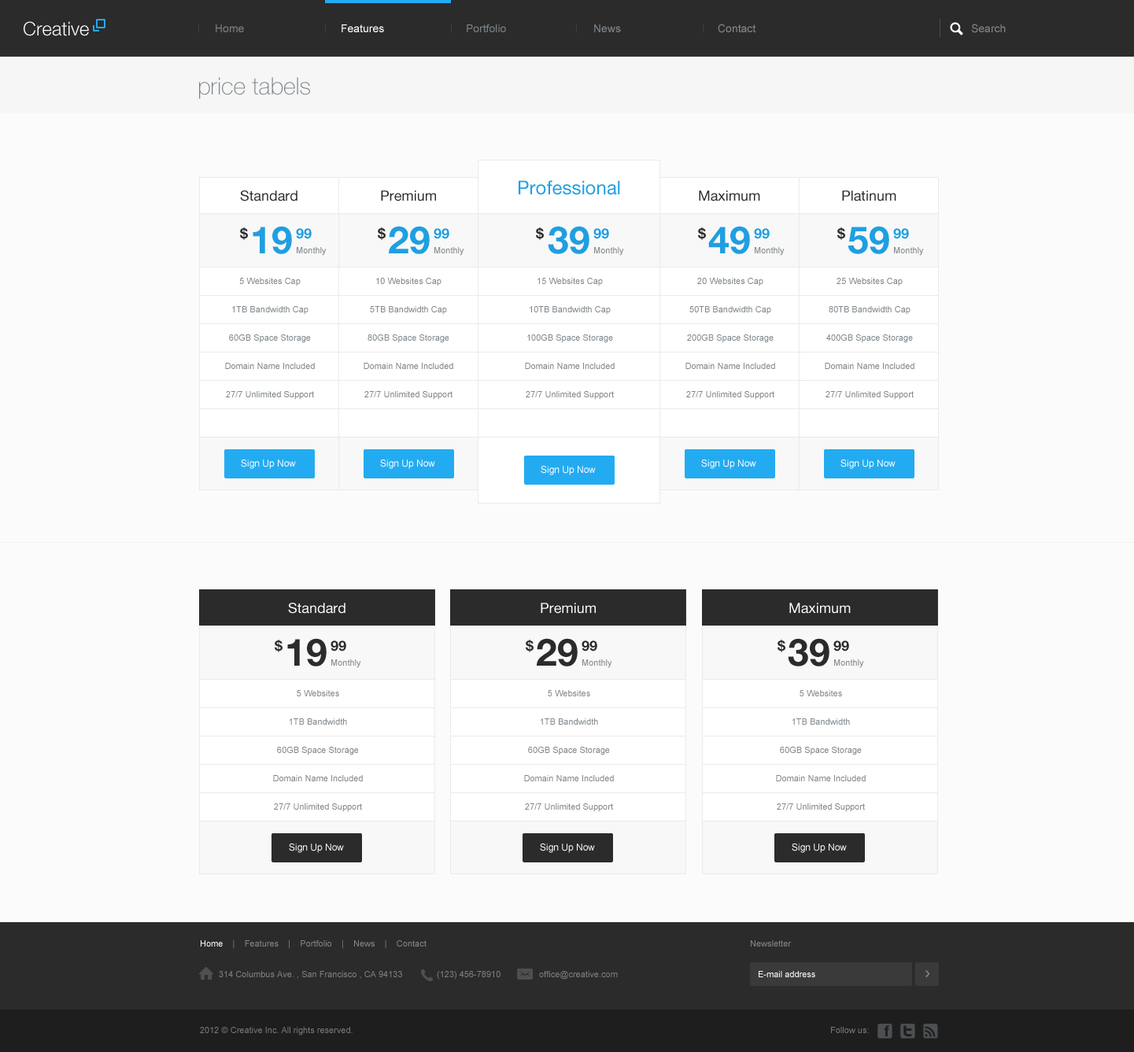
<style>
.page{position:relative;width:1134px;height:1052px;background:#fbfbfb}
.page>*{position:absolute;margin:0}
.t1{font:18.9px "HelveticaNeueLTStd-Lt";color:#ffffff}
.t2{font:8.2px "HelveticaNeueLTStd-Lt";scale:1.35 1}
.t3{font:11px "ArialMT";color:#7a8186}
.t4{font:11px "ArialMT";color:#ffffff}
.t5{font:11px "ArialMT";color:#80878c}
.t6{font:23.6px "HelveticaNeueLTStd-Th";color:#7a8186}
.t7{font:18.9px "HelveticaNeueLTStd-Roman";color:#1f9fe1}
.t8{font:14.2px "HelveticaNeueLTStd-Roman";color:#2b2b2b}
.t9{font:14.2px "HelveticaNeueLTStd-Bd";color:#2b2b2b}
.t10{font:37.8px "HelveticaNeueLTStd-Bd";color:#1f9fe1}
.t11{font:14.2px "HelveticaNeueLTStd-Bd";color:#1f9fe1}
.t12{font:8.7px "ArialMT";color:#80878c}
.t13{font:8.7px/28.3px "ArialMT";color:#80878c}
.t14{font:9.4px "ArialMT";color:#ffffff}
.t15{font:14.2px "HelveticaNeueLTStd-Roman";color:#ffffff}
.t16{font:37.8px "HelveticaNeueLTStd-Bd";color:#2b2b2b}
.t17{font:8.7px "ArialMT";color:#ffffff}
.t18{font:8.7px "ArialMT";color:#7a8186}
.t19{font:8.7px "ArialMT";color:#797979}
</style>
<div class="page">
<p class="t1" style="left:24px;top:21px;width:65px;height:15px">Creative</p>
<p class="t2" style="left:198px;top:24px;width:1px;height:9px">|</p>
<p class="t3" style="left:216px;top:24px;width:28px;height:8px">Home</p>
<p class="t2" style="left:325px;top:24px;width:1px;height:9px">|</p>
<p class="t4" style="left:341px;top:24px;width:43px;height:8px">Features</p>
<p class="t2" style="left:451px;top:24px;width:1px;height:9px">|</p>
<p class="t3" style="left:467px;top:24px;width:39px;height:8px">Portfolio</p>
<p class="t2" style="left:576px;top:24px;width:1px;height:9px">|</p>
<p class="t5" style="left:594px;top:24px;width:27px;height:8px">News</p>
<p class="t2" style="left:703px;top:24px;width:0px;height:9px">|</p>
<p class="t5" style="left:717px;top:24px;width:39px;height:9px">Contact</p>
<p class="t5" style="left:971px;top:24px;width:34px;height:9px">Search</p>
<p class="t6" style="left:199px;top:77px;width:111px;height:22px">price tabels</p>
<p class="t7" style="left:518px;top:180px;width:102px;height:15px">Professional</p>
<p class="t8" style="left:240px;top:190px;width:57px;height:11px">Standard</p>
<p class="t8" style="left:381px;top:190px;width:55px;height:11px">Premium</p>
<p class="t8" style="left:699px;top:190px;width:61px;height:11px">Maximum</p>
<p class="t8" style="left:842px;top:190px;width:54px;height:11px">Platinum</p>
<p class="t9" style="left:240px;top:227px;width:8px;height:13px">$</p>
<p class="t10" style="left:253px;top:226px;width:39px;height:28px">19</p>
<p class="t11" style="left:296px;top:228px;width:16px;height:11px">99</p>
<p class="t9" style="left:378px;top:227px;width:7px;height:13px">$</p>
<p class="t10" style="left:389px;top:226px;width:41px;height:28px">29</p>
<p class="t11" style="left:433px;top:228px;width:16px;height:11px">99</p>
<p class="t9" style="left:536px;top:227px;width:8px;height:13px">$</p>
<p class="t10" style="left:548px;top:226px;width:41px;height:28px">39</p>
<p class="t11" style="left:593px;top:228px;width:16px;height:11px">99</p>
<p class="t9" style="left:698px;top:227px;width:8px;height:13px">$</p>
<p class="t10" style="left:708px;top:226px;width:42px;height:28px">49</p>
<p class="t11" style="left:754px;top:228px;width:15px;height:11px">99</p>
<p class="t9" style="left:837px;top:227px;width:8px;height:13px">$</p>
<p class="t10" style="left:847px;top:226px;width:42px;height:28px">59</p>
<p class="t11" style="left:893px;top:228px;width:16px;height:11px">99</p>
<p class="t12" style="left:297px;top:247px;width:29px;height:9px">Monthly</p>
<p class="t12" style="left:434px;top:247px;width:30px;height:9px">Monthly</p>
<p class="t12" style="left:594px;top:247px;width:30px;height:9px">Monthly</p>
<p class="t12" style="left:754px;top:247px;width:30px;height:9px">Monthly</p>
<p class="t12" style="left:894px;top:247px;width:30px;height:9px">Monthly</p>
<p class="t13" style="left:225px;top:278px;width:90px;height:122px;text-align:center">5 Websites Cap<br>1TB Bandwidth Cap<br>60GB Space Storage<br>Domain Name Included<br>27/7 Unlimited Support</p>
<p class="t13" style="left:363px;top:278px;width:90px;height:122px;text-align:center">10 Websites Cap<br>5TB Bandwidth Cap<br>80GB Space Storage<br>Domain Name Included<br>27/7 Unlimited Support</p>
<p class="t13" style="left:525px;top:278px;width:89px;height:122px;text-align:center">15 Websites Cap<br>10TB Bandwidth Cap<br>100GB Space Storage<br>Domain Name Included<br>27/7 Unlimited Support</p>
<p class="t13" style="left:685px;top:278px;width:90px;height:122px;text-align:center">20 Websites Cap<br>50TB Bandwidth Cap<br>200GB Space Storage<br>Domain Name Included<br>27/7 Unlimited Support</p>
<p class="t13" style="left:824px;top:278px;width:90px;height:122px;text-align:center">25 Websites Cap<br>80TB Bandwidth Cap<br>400GB Space Storage<br>Domain Name Included<br>27/7 Unlimited Support</p>
<p class="t14" style="left:241px;top:459px;width:55px;height:10px">Sign Up Now</p>
<p class="t14" style="left:380px;top:459px;width:55px;height:10px">Sign Up Now</p>
<p class="t14" style="left:701px;top:459px;width:55px;height:10px">Sign Up Now</p>
<p class="t14" style="left:840px;top:459px;width:55px;height:10px">Sign Up Now</p>
<p class="t14" style="left:540px;top:466px;width:56px;height:9px">Sign Up Now</p>
<p class="t15" style="left:288px;top:603px;width:57px;height:11px">Standard</p>
<p class="t15" style="left:540px;top:603px;width:56px;height:11px">Premium</p>
<p class="t15" style="left:789px;top:603px;width:61px;height:11px">Maximum</p>
<p class="t9" style="left:275px;top:639px;width:7px;height:13px">$</p>
<p class="t16" style="left:287px;top:638px;width:39px;height:28px">19</p>
<p class="t9" style="left:330px;top:640px;width:16px;height:11px">99</p>
<p class="t9" style="left:526px;top:639px;width:7px;height:13px">$</p>
<p class="t16" style="left:537px;top:638px;width:40px;height:28px">29</p>
<p class="t9" style="left:581px;top:640px;width:16px;height:11px">99</p>
<p class="t9" style="left:777px;top:639px;width:8px;height:13px">$</p>
<p class="t16" style="left:788px;top:638px;width:41px;height:28px">39</p>
<p class="t9" style="left:833px;top:640px;width:16px;height:11px">99</p>
<p class="t12" style="left:331px;top:659px;width:30px;height:9px">Monthly</p>
<p class="t12" style="left:582px;top:659px;width:30px;height:9px">Monthly</p>
<p class="t12" style="left:834px;top:659px;width:30px;height:9px">Monthly</p>
<p class="t13" style="left:273px;top:690px;width:90px;height:122px;text-align:center">5 Websites<br>1TB Bandwidth<br>60GB Space Storage<br>Domain Name Included<br>27/7 Unlimited Support</p>
<p class="t13" style="left:524px;top:690px;width:90px;height:122px;text-align:center">5 Websites<br>1TB Bandwidth<br>60GB Space Storage<br>Domain Name Included<br>27/7 Unlimited Support</p>
<p class="t13" style="left:776px;top:690px;width:89px;height:122px;text-align:center">5 Websites<br>1TB Bandwidth<br>60GB Space Storage<br>Domain Name Included<br>27/7 Unlimited Support</p>
<p class="t14" style="left:289px;top:843px;width:55px;height:10px">Sign Up Now</p>
<p class="t14" style="left:540px;top:843px;width:55px;height:10px">Sign Up Now</p>
<p class="t14" style="left:791px;top:843px;width:56px;height:10px">Sign Up Now</p>
<p class="t12" style="left:201px;top:940px;width:225px;height:9px"><span class="t17">Home   </span> |    Features    |    Portfolio    |    News    |    Contact</p>
<p class="t12" style="left:751px;top:940px;width:40px;height:6px">Newsletter</p>
<p class="t18" style="left:219px;top:971px;width:183px;height:8px">314 Columbus Ave. , San Francisco , CA 94133</p>
<p class="t18" style="left:437px;top:971px;width:63px;height:8px">(123) 456-78910</p>
<p class="t18" style="left:539px;top:971px;width:79px;height:8px">office@creative.com</p>
<p class="t17" style="left:758px;top:971px;width:57px;height:6px">E-mail address</p>
<p class="t19" style="left:200px;top:1027px;width:152px;height:8px">2012 © Creative Inc. All rights reserved.</p>
<p class="t19" style="left:831px;top:1027px;width:38px;height:6px">Follow us:</p>
</div>
